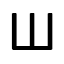
<style>
.page{position:relative;width:64px;height:64px;background:#ffffff}
.page>*{position:absolute;margin:0}
.t1{font:58.3px "Calibri";color:#000000}
</style>
<div class="page">
<p class="t1" style="left:11px;top:13px;width:42px;height:37px">Ш</p>
</div>
